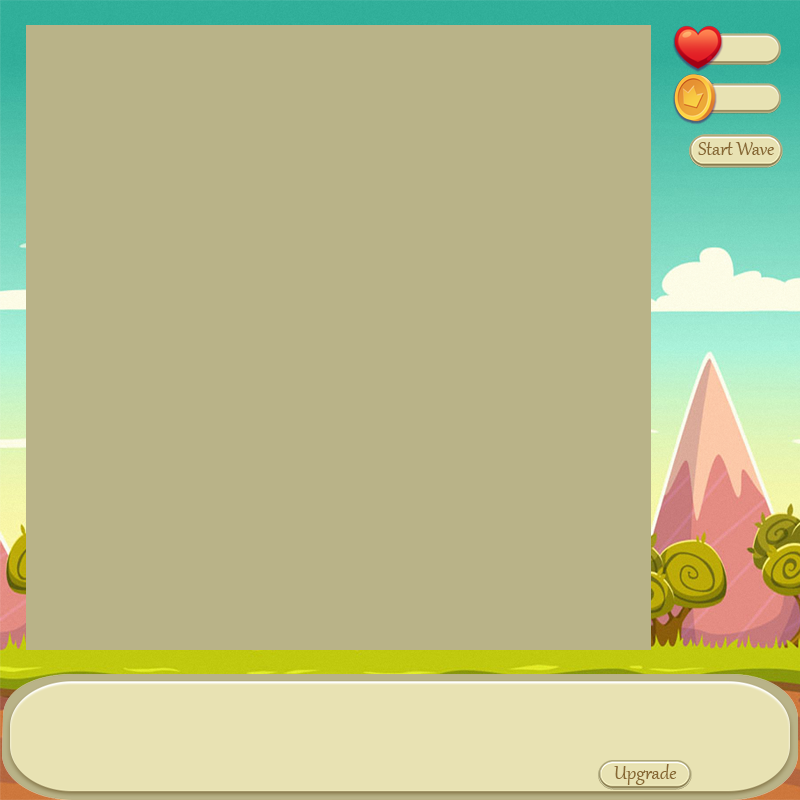
<style>
.page{position:relative;width:800px;height:800px;background:#b9b388}
.page>*{position:absolute;margin:0}
.t1{font:22.9px "Gabriola";color:#876833}
</style>
<div class="page">
<p class="t1" style="left:698px;top:142px;width:76px;height:13px">Start Wave</p>
<p class="t1" style="left:614px;top:764px;width:63px;height:21px">Upgrade</p>
</div>
